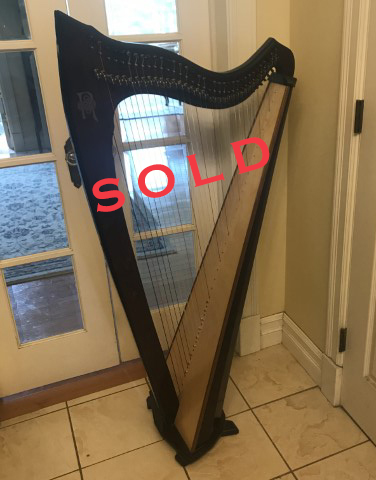
<style>
.page{position:relative;width:376px;height:480px}
.page>*{position:absolute;margin:0}
.t1{font:48px "CopperplateGothic-Bold";color:#f23a43}
</style>
<div class="page">
<p class="t1" style="left:92px;top:137px;width:178px;height:75px;rotate:-16deg">S O L D</p>
</div>
